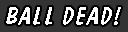
<style>
.page{position:relative;width:128px;height:32px;background:#333333}
.page>*{position:absolute;margin:0}
.t1{font:24.2px "DomDiagonalBT-Regular";letter-spacing:0.075em;color:#ffffff}
</style>
<div class="page">
<p class="t1" style="left:6px;top:7px;width:115px;height:18px">BALL DEAD!</p>
</div>
